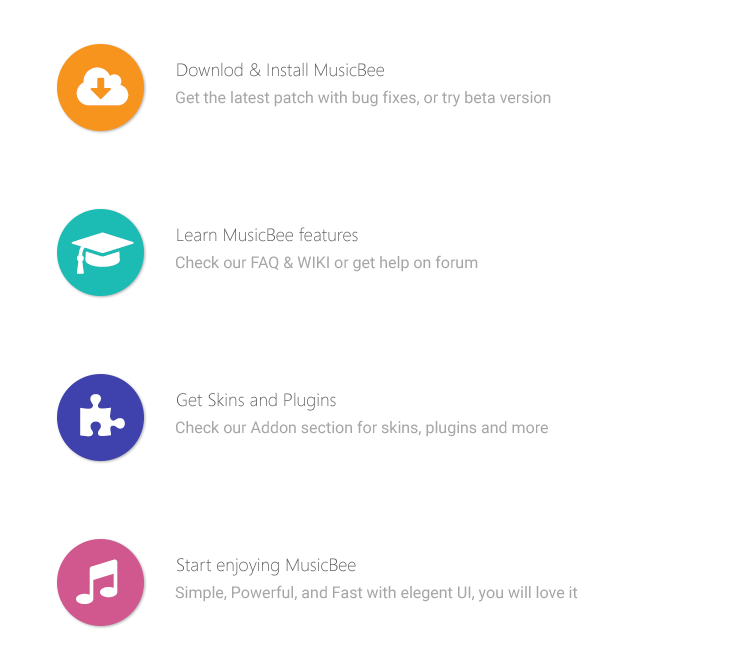
<style>
.page{position:relative;width:745px;height:650px;background:#ffffff}
.page>*{position:absolute;margin:0}
.t1{font:18px "SegoeUI-Light";color:#616161}
.t2{font:16px "Roboto-Regular";color:#a6a6a6}
</style>
<div class="page">
<p class="t1" style="left:177px;top:62px;width:207px;height:15px">Downlod &amp; Install MusicBee</p>
<p class="t2" style="left:176px;top:90px;width:375px;height:17px">Get the latest patch with bug fixes, or try beta version</p>
<p class="t1" style="left:177px;top:227px;width:181px;height:15px">Learn MusicBee features</p>
<p class="t2" style="left:176px;top:255px;width:302px;height:17px">Check our FAQ &amp; WIKI or get help on forum</p>
<p class="t1" style="left:177px;top:392px;width:159px;height:19px">Get Skins and Plugins</p>
<p class="t2" style="left:176px;top:420px;width:372px;height:17px">Check our Addon section for skins, plugins and more</p>
<p class="t1" style="left:177px;top:558px;width:179px;height:18px">Start enjoying MusicBee</p>
<p class="t2" style="left:175px;top:585px;width:403px;height:17px">Simple, Powerful, and Fast with elegent UI, you will love it</p>
</div>
